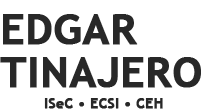
<style>
.page{position:relative;width:217px;height:109px;background:#ffffff}
.page>*{position:absolute;margin:0}
.t1{font:42px/4.7px "TrebuchetMS-Bold";color:#282828;font-weight:bold}
.t2{font:14px "TrebuchetMS-Bold";color:#282828;font-weight:bold}
</style>
<div class="page">
<p class="t1" style="left:0px;top:14px;width:201px;height:74px">EDGAR<br><br><br><br><br><br><br><br><br>TINAJERO</p>
<p class="t2" style="left:44px;top:98px;width:119px;height:11px">ISeC • ECSI • CEH</p>
</div>
